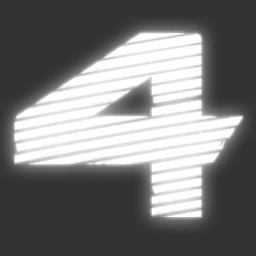
<style>
.page{position:relative;width:256px;height:256px;background:#333333}
.page>*{position:absolute;margin:0}
.t1{font:254.7px "Ethnocentric";letter-spacing:0.05em;color:#ffffff;scale:0.86 1}
</style>
<div class="page">
<p class="t1" style="left:14px;top:33px;width:230px;height:184px">4</p>
</div>
